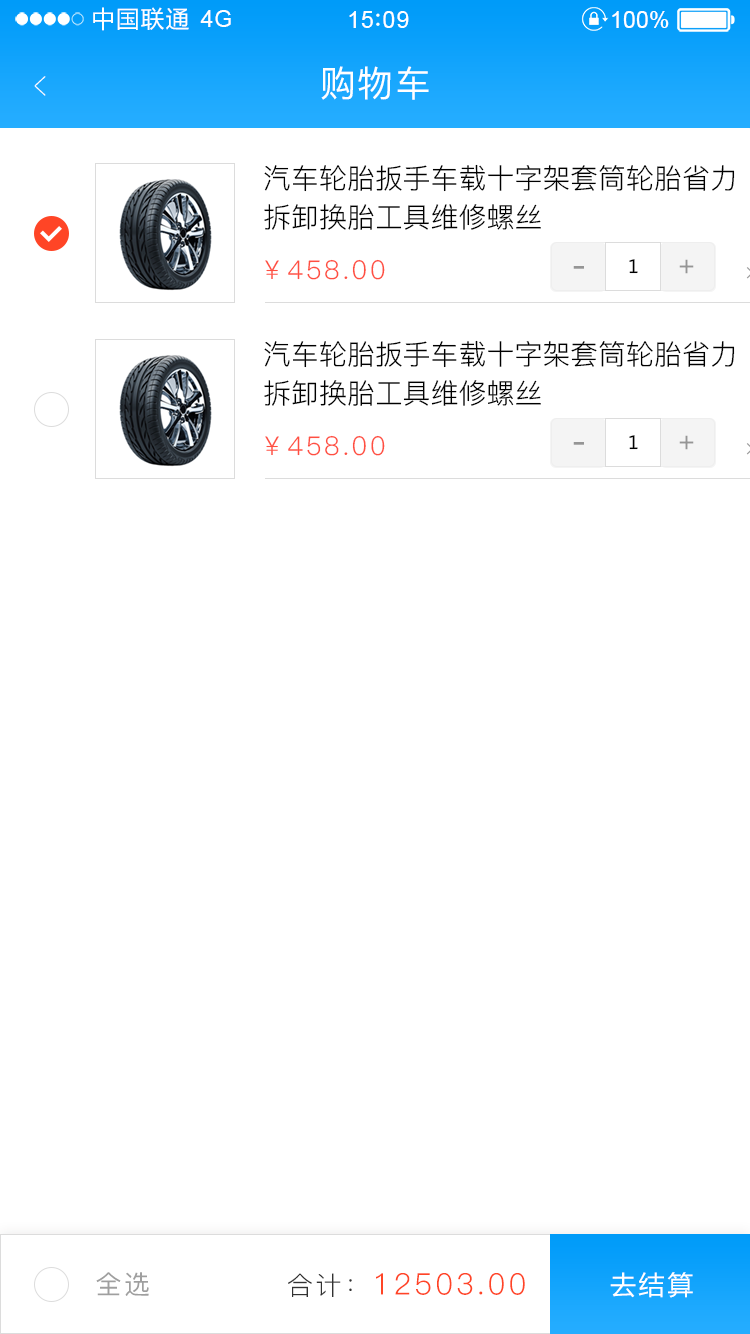
<style>
.page{position:relative;width:750px;height:1334px;background:#ffffff}
.page>*{position:absolute;margin:0}
.t1{font:23.4px "MicrosoftYaHei";letter-spacing:0.06em;color:#ffffff}
.t2{font:23.4px "ArialMT";letter-spacing:0.02em;color:#ffffff}
.t3{font:23.4px "ArialMT";letter-spacing:0.04em;color:#ffffff}
.t4{font:23.4px "ArialMT";color:#ffffff}
.t5{font:39px "PingFang-SC-ExtraLight";letter-spacing:0.1em;color:#ffffff;scale:0.51 1}
.t6{font:36px "PingFang-SC-Medium";letter-spacing:0.05em;color:#ffffff}
.t7{font:27.9px/38.9px "PingFang-SC-Regular";color:#000000}
.t8{font:26px "PingFang-SC-Regular";letter-spacing:0.1em;color:#ff4f41}
.t9{font:35.8px "MicrosoftYaHei";letter-spacing:0.05em;color:#959595}
.t10{font:17.9px "MicrosoftYaHei";letter-spacing:0.05em;color:#000000}
.t11{font:26.9px "MicrosoftYaHei";letter-spacing:0.05em;color:#959595}
.t12{font:26px "PingFang-SC-Medium";letter-spacing:0.1em;color:#9f9f9f}
.t13{font:29.7px "PingFang-SC-Regular";letter-spacing:0.1em;color:#ff4526}
.t14{font:25.8px "PingFang-SC-Regular";letter-spacing:0.1em;color:#323232}
.t15{font:26px "MicrosoftYaHei";letter-spacing:0.1em;color:#ffffff}
</style>
<div class="page">
<p class="t1" style="left:93px;top:7px;width:96px;height:24px">中国联通</p>
<p class="t2" style="left:200px;top:10px;width:31px;height:17px">4G</p>
<p class="t3" style="left:349px;top:11px;width:60px;height:17px">15 09</p>
<p class="t4" style="left:612px;top:11px;width:57px;height:17px">100%</p>
<p class="t5" style="left:34px;top:76px;width:12px;height:20px;rotate:180deg">&gt;</p>
<p class="t6" style="left:321px;top:66px;width:108px;height:34px">购物车</p>
<p class="t7" style="left:264px;top:164px;width:471px;height:66px">汽车轮胎扳手车载十字架套筒轮胎省力<br>拆卸换胎工具维修螺丝</p>
<p class="t8" style="left:265px;top:259px;width:120px;height:21px">￥458.00</p>
<p class="t9" style="left:573px;top:266px;width:11px;height:3px">-</p>
<p class="t10" style="left:629px;top:259px;width:9px;height:15px">1</p>
<p class="t11" style="left:679px;top:259px;width:15px;height:15px">+</p>
<p class="t7" style="left:264px;top:340px;width:471px;height:66px">汽车轮胎扳手车载十字架套筒轮胎省力<br>拆卸换胎工具维修螺丝</p>
<p class="t8" style="left:265px;top:435px;width:120px;height:21px">￥458.00</p>
<p class="t10" style="left:629px;top:435px;width:9px;height:15px">1</p>
<p class="t11" style="left:679px;top:435px;width:15px;height:15px">+</p>
<p class="t9" style="left:573px;top:442px;width:11px;height:3px">-</p>
<p class="t12" style="left:96px;top:1272px;width:53px;height:24px">全选</p>
<p class="t13" style="left:288px;top:1273px;width:237px;height:24px"><span class="t14">合计：</span>12503.00</p>
<p class="t15" style="left:610px;top:1272px;width:83px;height:26px">去结算</p>
</div>
